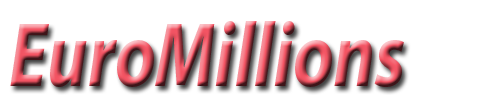
<style>
.page{position:relative;width:500px;height:100px;background:#ffffff}
.page>*{position:absolute;margin:0}
.t1{font:92px "MyriadPro-BoldIt";scale:0.79 1}
</style>
<div class="page">
<p class="t1" style="left:10px;top:21px;width:394px;height:66px">EuroMillions</p>
</div>
